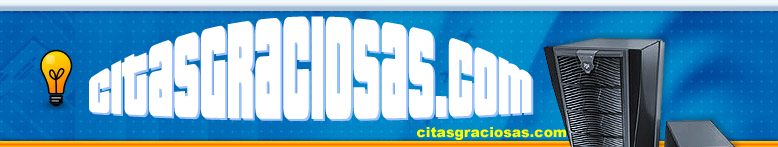
<style>
.page{position:relative;width:778px;height:147px;background:#ffffff}
.page>*{position:absolute;margin:0}
.t1{font:63px "Pricedown";color:#ffffff}
.t2{font:14px "Arial-Black";color:#fffc00}
</style>
<div class="page">
<p class="t1" style="left:89px;top:16px;width:443px;height:103px">CITaSGraCIOSaS.COm</p>
<p class="t1" style="left:91px;top:18px;width:443px;height:103px">CITaSGraCIOSaS.COm</p>
<p class="t2" style="left:417px;top:127px;width:149px;height:13px">citasgraciosas.com</p>
</div>
